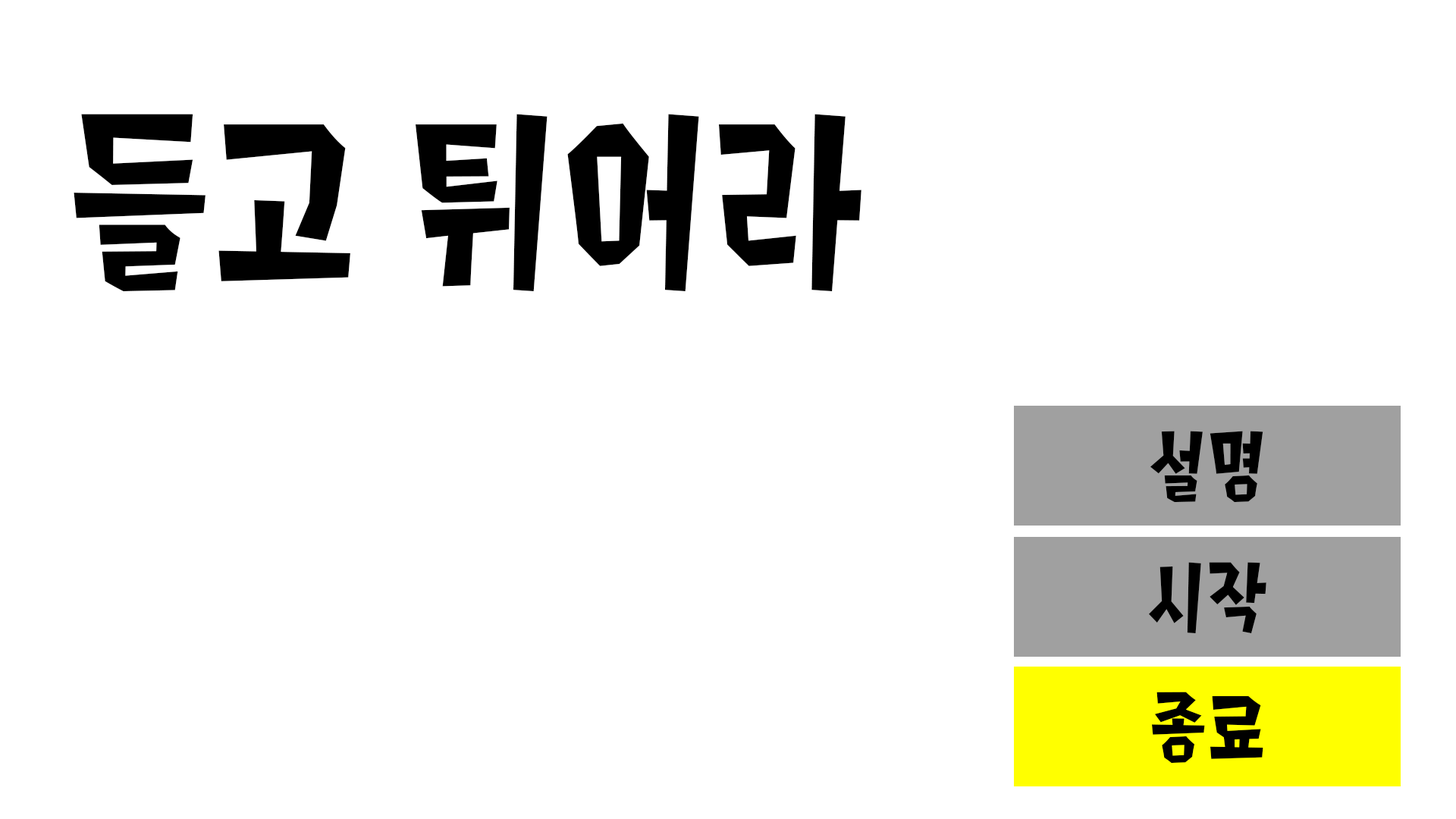
<style>
.page{position:relative;width:1456px;height:819px;background:#ffffff}
.page>*{position:absolute;margin:0}
.t1{font:227.5px "Splat2K";letter-spacing:0.01em;color:#000000}
.t2{font:91px "Splat2K";letter-spacing:0.01em;color:#000000}
</style>
<div class="page">
<p class="t1" style="left:74px;top:114px;width:787px;height:177px">들고 튀어라</p>
<p class="t2" style="left:1150px;top:431px;width:113px;height:71px">설명</p>
<p class="t2" style="left:1149px;top:562px;width:117px;height:71px">시작</p>
<p class="t2" style="left:1152px;top:692px;width:111px;height:71px">종료</p>
</div>
